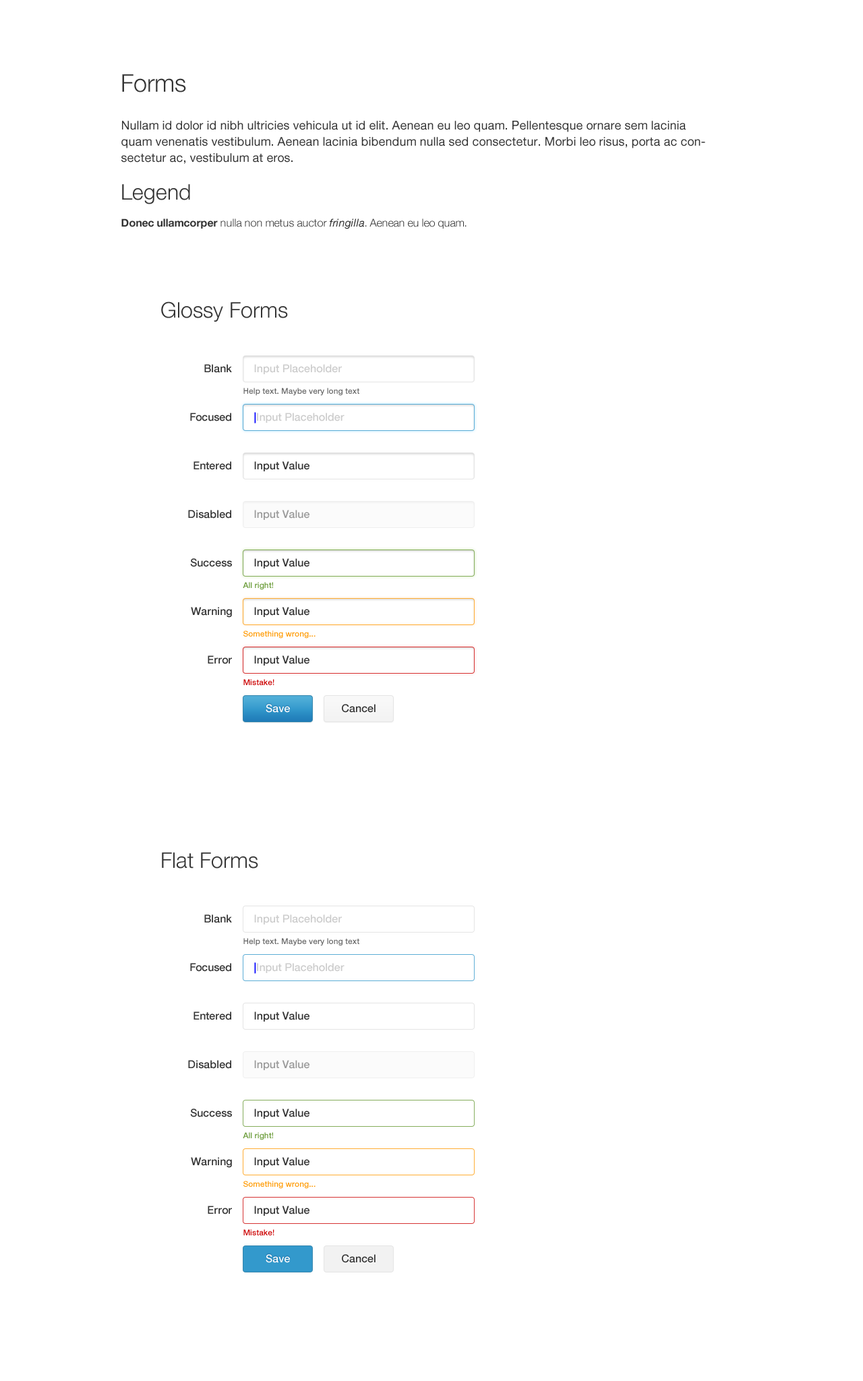
<style>
.page{position:relative;width:863px;height:1381px;background:#ffffff}
.page>*{position:absolute;margin:0}
.t1{font:12.1px/16.2px "HelveticaNeue";color:#333333}
.t2{font:24.3px/32.4px "HelveticaNeue-Light";color:#333333}
.t3{font:21.6px/27px "HelveticaNeue-Light";color:#333333}
.t4{font:10.8px/16.2px "HelveticaNeue-Bold";color:#333333}
.t5{font:10.8px/16.2px "HelveticaNeue-Light";color:#333333}
.t6{font:10.8px/16.2px "HelveticaNeue-Italic";color:#333333}
.t7{font:21.6px "HelveticaNeue-Light";color:#333333}
.t8{font:10.8px "HelveticaNeue-Medium";color:#333333}
.t9{font:10.8px "HelveticaNeue-Medium";color:#cccccc}
.t10{font:8.1px "HelveticaNeue-Medium";color:#666666}
.t11{font:10.8px "HelveticaNeue-Medium";color:#0000ff}
.t12{font:10.8px "HelveticaNeue-Medium";color:#999999}
.t13{font:8.1px "HelveticaNeue-Medium";color:#669933}
.t14{font:8.1px "HelveticaNeue-Medium";color:#ff9900}
.t15{font:8.1px "HelveticaNeue-Medium";color:#cc0000}
.t16{font:10.8px "HelveticaNeue-Medium";color:#ffffff}
</style>
<div class="page">
<p class="t1" style="left:121px;top:74px;width:584px;height:155px"><span class="t2">Forms <br></span>Nullam id dolor id nibh ultricies vehicula ut id elit. Aenean eu leo quam. Pellentesque ornare sem lacinia quam venenatis vestibulum. Aenean lacinia bibendum nulla sed consectetur. Morbi leo risus, porta ac consectetur ac, vestibulum at eros.<br><span class="t3">Legend<br></span><span class="t4">Donec ullamcorper</span><span class="t5"> nulla non metus auctor </span><span class="t6">fringilla</span><span class="t5">. Aenean eu leo quam.</span></p>
<p class="t7" style="left:161px;top:301px;width:127px;height:21px">Glossy Forms</p>
<p class="t8" style="left:204px;top:364px;width:28px;height:9px">Blank</p>
<p class="t9" style="left:254px;top:364px;width:88px;height:10px">Input Placeholder</p>
<p class="t10" style="left:243px;top:388px;width:116px;height:8px">Help text. Maybe very long text</p>
<p class="t8" style="left:190px;top:413px;width:41px;height:9px">Focused</p>
<p class="t9" style="left:254px;top:412px;width:91px;height:12px"><span class="t11">|</span>Input Placeholder</p>
<p class="t8" style="left:194px;top:461px;width:37px;height:9px">Entered</p>
<p class="t8" style="left:254px;top:461px;width:56px;height:10px">Input Value</p>
<p class="t8" style="left:188px;top:510px;width:43px;height:9px">Disabled</p>
<p class="t12" style="left:254px;top:510px;width:56px;height:10px">Input Value</p>
<p class="t8" style="left:190px;top:558px;width:42px;height:9px">Success</p>
<p class="t8" style="left:254px;top:558px;width:56px;height:11px">Input Value</p>
<p class="t13" style="left:243px;top:582px;width:30px;height:8px">All right!</p>
<p class="t8" style="left:191px;top:607px;width:41px;height:11px">Warning</p>
<p class="t8" style="left:254px;top:607px;width:56px;height:10px">Input Value</p>
<p class="t14" style="left:243px;top:631px;width:73px;height:8px">Something wrong...</p>
<p class="t8" style="left:208px;top:656px;width:24px;height:8px">Error</p>
<p class="t8" style="left:254px;top:656px;width:56px;height:10px">Input Value</p>
<p class="t15" style="left:243px;top:679px;width:31px;height:6px">Mistake!</p>
<p class="t16" style="left:266px;top:704px;width:24px;height:9px">Save</p>
<p class="t8" style="left:342px;top:704px;width:34px;height:9px">Cancel</p>
<p class="t7" style="left:162px;top:852px;width:96px;height:17px">Flat Forms</p>
<p class="t8" style="left:204px;top:915px;width:28px;height:8px">Blank</p>
<p class="t9" style="left:254px;top:915px;width:88px;height:10px">Input Placeholder</p>
<p class="t10" style="left:243px;top:938px;width:116px;height:8px">Help text. Maybe very long text</p>
<p class="t8" style="left:190px;top:963px;width:41px;height:9px">Focused</p>
<p class="t9" style="left:254px;top:962px;width:91px;height:12px"><span class="t11">|</span>Input Placeholder</p>
<p class="t8" style="left:194px;top:1012px;width:37px;height:8px">Entered</p>
<p class="t8" style="left:254px;top:1012px;width:56px;height:10px">Input Value</p>
<p class="t8" style="left:188px;top:1060px;width:43px;height:9px">Disabled</p>
<p class="t12" style="left:254px;top:1060px;width:56px;height:10px">Input Value</p>
<p class="t8" style="left:190px;top:1109px;width:42px;height:9px">Success</p>
<p class="t8" style="left:254px;top:1109px;width:56px;height:10px">Input Value</p>
<p class="t13" style="left:243px;top:1132px;width:30px;height:8px">All right!</p>
<p class="t8" style="left:191px;top:1157px;width:41px;height:11px">Warning</p>
<p class="t8" style="left:254px;top:1157px;width:56px;height:10px">Input Value</p>
<p class="t14" style="left:243px;top:1181px;width:73px;height:8px">Something wrong...</p>
<p class="t8" style="left:208px;top:1206px;width:24px;height:9px">Error</p>
<p class="t8" style="left:254px;top:1206px;width:56px;height:10px">Input Value</p>
<p class="t15" style="left:243px;top:1230px;width:31px;height:6px">Mistake!</p>
<p class="t16" style="left:266px;top:1254px;width:24px;height:9px">Save</p>
<p class="t8" style="left:342px;top:1254px;width:34px;height:9px">Cancel</p>
</div>
